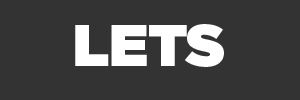
<style>
.page{position:relative;width:300px;height:100px;background:#333333}
.page>*{position:absolute;margin:0}
.t1{font:58.6px "Gotham-Ultra";color:#ffffff}
</style>
<div class="page">
<p class="t1" style="left:75px;top:24px;width:149px;height:43px">LETS</p>
</div>
